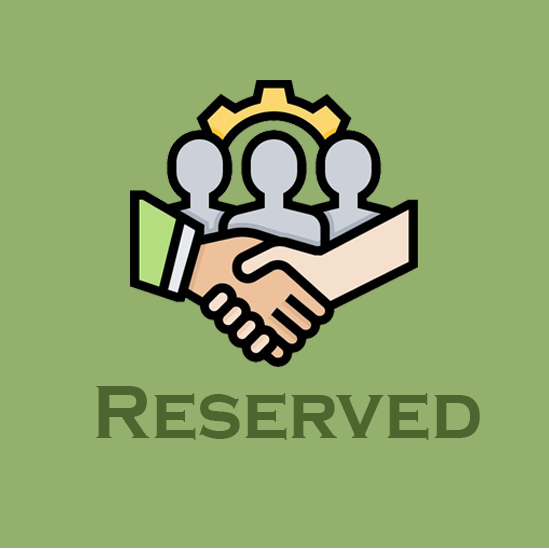
<style>
.page{position:relative;width:549px;height:549px;background:#93b06c}
.page>*{position:absolute;margin:0}
.t1{font:78.5px "CopperplateGothic-Bold";color:#4d652e;scale:0.92 1}
</style>
<div class="page">
<p class="t1" style="left:96px;top:386px;width:384px;height:54px">Reserved</p>
</div>
